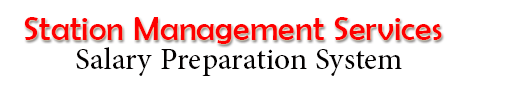
<style>
.page{position:relative;width:506px;height:94px;background:#ffffff}
.page>*{position:absolute;margin:0}
.t1{font:34.2px "BerlinSansFB-Reg";color:#fe0000}
.t2{font:42.2px "AdobeArabic-Regular";color:#030000}
</style>
<div class="page">
<p class="t1" style="left:24px;top:17px;width:418px;height:27px">Station Management Services</p>
<p class="t2" style="left:76px;top:47px;width:326px;height:29px">Salary Preparation System</p>
</div>
